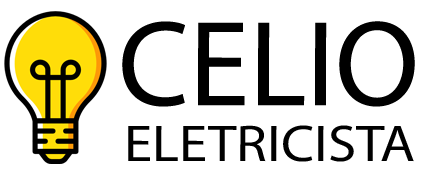
<style>
.page{position:relative;width:436px;height:174px;background:#ffffff}
.page>*{position:absolute;margin:0}
.t1{font:121.9px "MyriadPro-Regular";color:#000000}
.t2{font:51.9px "MyriadPro-Regular";color:#000000;scale:1.1 1}
</style>
<div class="page">
<p class="t1" style="left:122px;top:21px;width:293px;height:86px">CELIO</p>
<p class="t2" style="left:128px;top:125px;width:286px;height:37px">ELETRICISTA</p>
</div>
